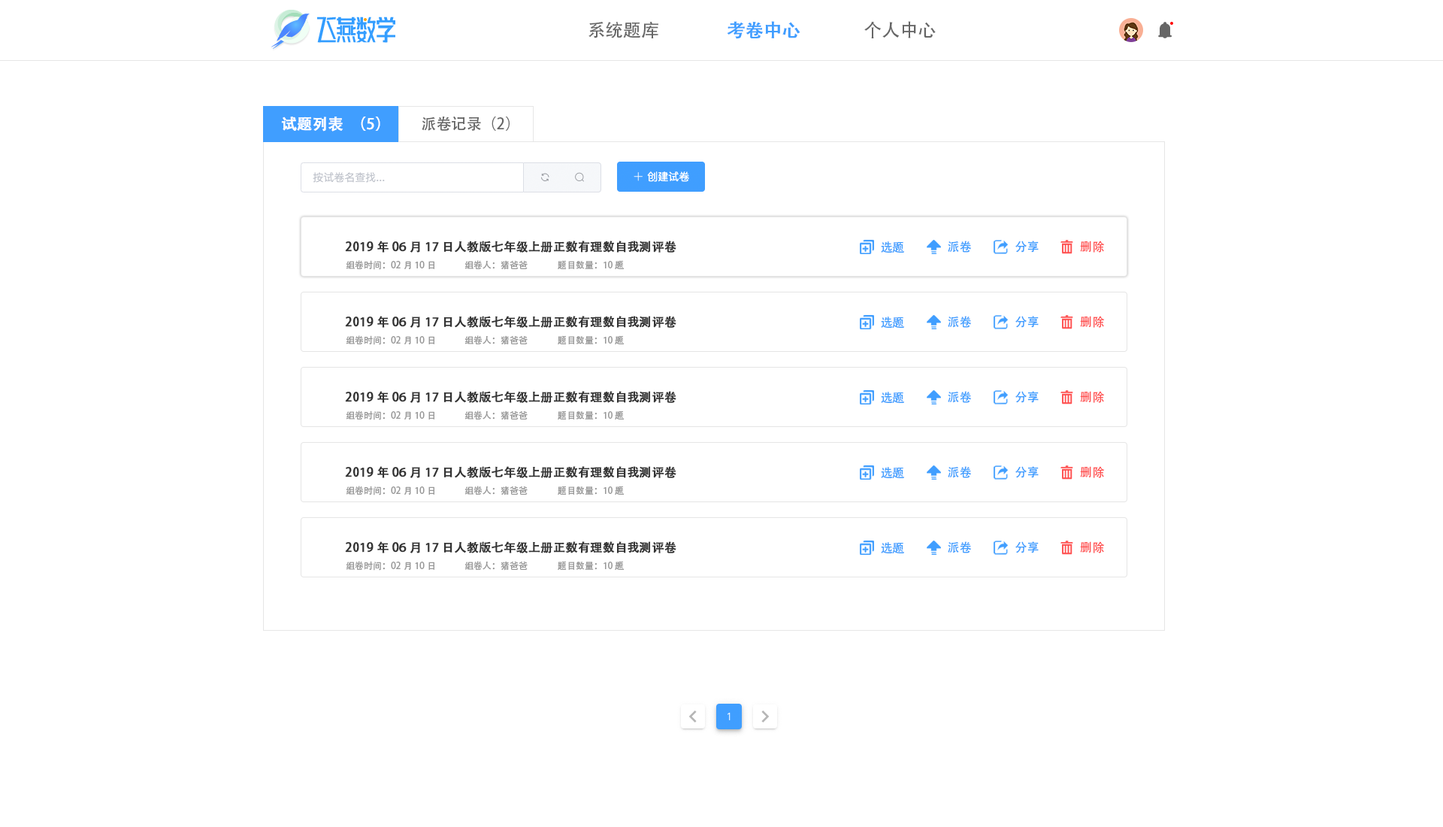
<style>
.page{position:relative;width:1443px;height:827px;background:#ffffff}
.page>*{position:absolute;margin:0}
.t1{font:18px "AdobeHeitiStd-Regular";color:#666666}
.t2{font:18px "AdobeHeitiStd-Regular";color:#409eff;font-weight:bold}
.t3{font:15px "AdobeHeitiStd-Regular";color:#ffffff;font-weight:bold}
.t4{font:15px "AdobeHeitiStd-Regular";color:#666666}
.t5{font:12px "AdobeHeitiStd-Regular";color:#333333;font-weight:bold}
.t6{font:12px "AdobeHeitiStd-Regular";color:#409eff}
.t7{font:12px "AdobeHeitiStd-Regular";color:#ff5454}
.t8{font:9px "AdobeHeitiStd-Regular";color:#999999}
</style>
<div class="page">
<p class="t1" style="left:588px;top:22px;width:70px;height:16px">系统题库</p>
<p class="t2" style="left:727px;top:21px;width:73px;height:18px">考卷中心</p>
<p class="t1" style="left:864px;top:21px;width:71px;height:17px">个人中心</p>
<p class="t3" style="left:281px;top:116px;width:99px;height:15px">试题列表（5）</p>
<p class="t4" style="left:422px;top:116px;width:87px;height:15px">派卷记录（2）</p>
<p class="t5" style="left:345px;top:240px;width:331px;height:12px">2019年06月17日人教版七年级上册正数有理数自我测评卷</p>
<p class="t6" style="left:881px;top:241px;width:23px;height:11px">选题</p>
<p class="t6" style="left:948px;top:240px;width:23px;height:12px">派卷</p>
<p class="t6" style="left:1015px;top:240px;width:23px;height:12px">分享</p>
<p class="t7" style="left:1080px;top:240px;width:25px;height:12px">删除</p>
<p class="t8" style="left:346px;top:260px;width:89px;height:10px">组卷时间：02月10日</p>
<p class="t8" style="left:464px;top:260px;width:63px;height:10px">组卷人：猪爸爸</p>
<p class="t8" style="left:558px;top:260px;width:66px;height:9px">题目数量：10题</p>
<p class="t5" style="left:345px;top:316px;width:331px;height:12px">2019年06月17日人教版七年级上册正数有理数自我测评卷</p>
<p class="t6" style="left:881px;top:316px;width:23px;height:12px">选题</p>
<p class="t6" style="left:948px;top:316px;width:23px;height:12px">派卷</p>
<p class="t6" style="left:1015px;top:316px;width:23px;height:12px">分享</p>
<p class="t7" style="left:1080px;top:316px;width:25px;height:12px">删除</p>
<p class="t8" style="left:346px;top:335px;width:89px;height:10px">组卷时间：02月10日</p>
<p class="t8" style="left:464px;top:335px;width:63px;height:10px">组卷人：猪爸爸</p>
<p class="t8" style="left:558px;top:335px;width:66px;height:9px">题目数量：10题</p>
<p class="t5" style="left:345px;top:391px;width:331px;height:12px">2019年06月17日人教版七年级上册正数有理数自我测评卷</p>
<p class="t6" style="left:881px;top:391px;width:23px;height:12px">选题</p>
<p class="t6" style="left:948px;top:391px;width:23px;height:12px">派卷</p>
<p class="t6" style="left:1015px;top:391px;width:23px;height:12px">分享</p>
<p class="t7" style="left:1080px;top:391px;width:25px;height:12px">删除</p>
<p class="t8" style="left:346px;top:410px;width:89px;height:10px">组卷时间：02月10日</p>
<p class="t8" style="left:464px;top:410px;width:63px;height:10px">组卷人：猪爸爸</p>
<p class="t8" style="left:558px;top:410px;width:66px;height:9px">题目数量：10题</p>
<p class="t5" style="left:345px;top:466px;width:331px;height:12px">2019年06月17日人教版七年级上册正数有理数自我测评卷</p>
<p class="t6" style="left:881px;top:467px;width:23px;height:11px">选题</p>
<p class="t6" style="left:948px;top:466px;width:23px;height:12px">派卷</p>
<p class="t6" style="left:1015px;top:466px;width:23px;height:12px">分享</p>
<p class="t7" style="left:1080px;top:466px;width:25px;height:12px">删除</p>
<p class="t8" style="left:346px;top:485px;width:89px;height:10px">组卷时间：02月10日</p>
<p class="t8" style="left:464px;top:485px;width:63px;height:10px">组卷人：猪爸爸</p>
<p class="t8" style="left:558px;top:485px;width:66px;height:9px">题目数量：10题</p>
<p class="t5" style="left:345px;top:541px;width:331px;height:12px">2019年06月17日人教版七年级上册正数有理数自我测评卷</p>
<p class="t6" style="left:881px;top:542px;width:23px;height:11px">选题</p>
<p class="t6" style="left:948px;top:541px;width:23px;height:12px">派卷</p>
<p class="t6" style="left:1015px;top:541px;width:23px;height:12px">分享</p>
<p class="t7" style="left:1080px;top:541px;width:25px;height:12px">删除</p>
<p class="t8" style="left:346px;top:561px;width:89px;height:9px">组卷时间：02月10日</p>
<p class="t8" style="left:464px;top:561px;width:63px;height:9px">组卷人：猪爸爸</p>
<p class="t8" style="left:558px;top:561px;width:66px;height:9px">题目数量：10题</p>
</div>
